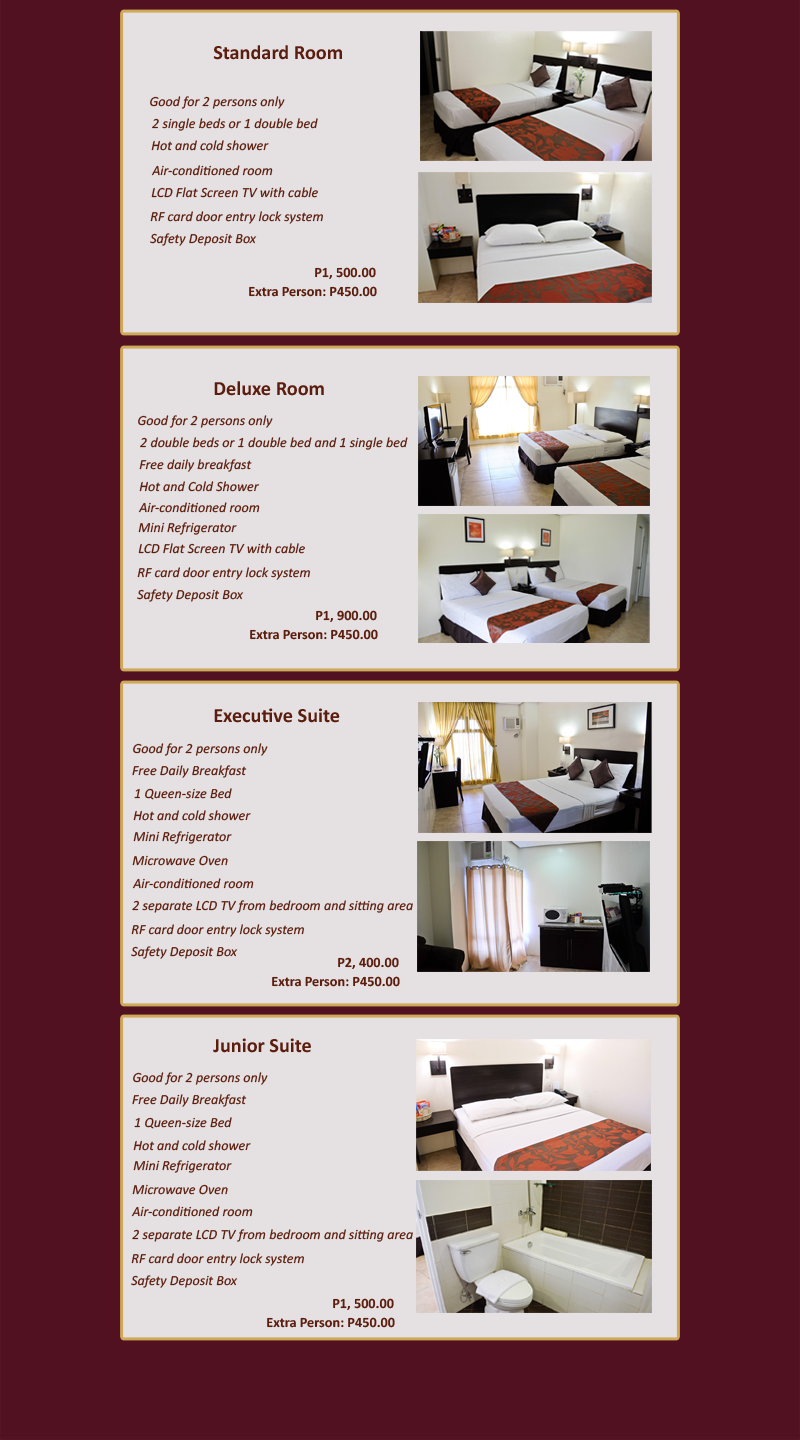
<style>
.page{position:relative;width:800px;height:1440px;background:#e5e0e1}
.page>*{position:absolute;margin:0}
.t1{font:20.3px "Calibri-Bold";color:#5b1d0e}
.t2{font:14.1px "Calibri-Italic";color:#5b1d0e}
.t3{font:14.3px "Calibri-Bold";color:#5b1d0e}
</style>
<div class="page">
<p class="t1" style="left:213px;top:45px;width:129px;height:15px">Standard Room</p>
<p class="t2" style="left:150px;top:96px;width:135px;height:13px">Good for 2 persons only</p>
<p class="t2" style="left:152px;top:118px;width:166px;height:13px">2 single beds or 1 double bed</p>
<p class="t2" style="left:151px;top:140px;width:118px;height:11px">Hot and cold shower</p>
<p class="t2" style="left:151px;top:165px;width:122px;height:11px">Air-conditioned room</p>
<p class="t2" style="left:151px;top:187px;width:167px;height:11px">LCD Flat Screen TV with cable</p>
<p class="t2" style="left:150px;top:211px;width:173px;height:13px">RF card door entry lock system</p>
<p class="t2" style="left:150px;top:233px;width:107px;height:13px">Safety Deposit Box</p>
<p class="t3" style="left:315px;top:267px;width:61px;height:12px">P1, 500.00</p>
<p class="t3" style="left:249px;top:286px;width:128px;height:11px">Extra Person: P450.00</p>
<p class="t1" style="left:214px;top:381px;width:110px;height:15px">Deluxe Room</p>
<p class="t2" style="left:138px;top:415px;width:135px;height:13px">Good for 2 persons only</p>
<p class="t2" style="left:140px;top:437px;width:268px;height:13px">2 double beds or 1 double bed and 1 single bed</p>
<p class="t2" style="left:139px;top:459px;width:113px;height:13px">Free daily breakfast</p>
<p class="t2" style="left:139px;top:481px;width:121px;height:11px">Hot and Cold Shower</p>
<p class="t2" style="left:138px;top:502px;width:122px;height:11px">Air-conditioned room</p>
<p class="t2" style="left:138px;top:522px;width:99px;height:13px">Mini Refrigerator</p>
<p class="t2" style="left:138px;top:543px;width:167px;height:11px">LCD Flat Screen TV with cable</p>
<p class="t2" style="left:137px;top:567px;width:173px;height:13px">RF card door entry lock system</p>
<p class="t2" style="left:137px;top:589px;width:107px;height:13px">Safety Deposit Box</p>
<p class="t3" style="left:316px;top:610px;width:61px;height:12px">P1, 900.00</p>
<p class="t3" style="left:250px;top:629px;width:128px;height:11px">Extra Person: P450.00</p>
<p class="t1" style="left:214px;top:708px;width:126px;height:15px">Executive Suite</p>
<p class="t2" style="left:133px;top:743px;width:135px;height:13px">Good for 2 persons only</p>
<p class="t2" style="left:132px;top:765px;width:115px;height:13px">Free Daily Breakfast</p>
<p class="t2" style="left:134px;top:788px;width:98px;height:12px">1 Queen-size Bed</p>
<p class="t2" style="left:133px;top:810px;width:118px;height:11px">Hot and cold shower</p>
<p class="t2" style="left:133px;top:831px;width:99px;height:13px">Mini Refrigerator</p>
<p class="t2" style="left:132px;top:855px;width:96px;height:11px">Microwave Oven</p>
<p class="t2" style="left:132px;top:878px;width:122px;height:11px">Air-conditioned room</p>
<p class="t2" style="left:132px;top:900px;width:281px;height:13px">2 separate LCD TV from bedroom and sitting area</p>
<p class="t2" style="left:131px;top:924px;width:173px;height:13px">RF card door entry lock system</p>
<p class="t2" style="left:131px;top:946px;width:107px;height:13px">Safety Deposit Box</p>
<p class="t3" style="left:338px;top:957px;width:61px;height:12px">P2, 400.00</p>
<p class="t3" style="left:272px;top:976px;width:128px;height:11px">Extra Person: P450.00</p>
<p class="t1" style="left:213px;top:1038px;width:98px;height:15px">Junior Suite</p>
<p class="t2" style="left:133px;top:1072px;width:135px;height:13px">Good for 2 persons only</p>
<p class="t2" style="left:132px;top:1094px;width:115px;height:13px">Free Daily Breakfast</p>
<p class="t2" style="left:134px;top:1117px;width:98px;height:12px">1 Queen-size Bed</p>
<p class="t2" style="left:133px;top:1140px;width:118px;height:11px">Hot and cold shower</p>
<p class="t2" style="left:133px;top:1160px;width:99px;height:13px">Mini Refrigerator</p>
<p class="t2" style="left:132px;top:1184px;width:96px;height:11px">Microwave Oven</p>
<p class="t2" style="left:131px;top:1206px;width:122px;height:11px">Air-conditioned room</p>
<p class="t2" style="left:132px;top:1229px;width:281px;height:13px">2 separate LCD TV from bedroom and sitting area</p>
<p class="t2" style="left:131px;top:1253px;width:173px;height:13px">RF card door entry lock system</p>
<p class="t2" style="left:131px;top:1275px;width:107px;height:13px">Safety Deposit Box</p>
<p class="t3" style="left:333px;top:1298px;width:61px;height:12px">P1, 500.00</p>
<p class="t3" style="left:267px;top:1317px;width:128px;height:11px">Extra Person: P450.00</p>
</div>
